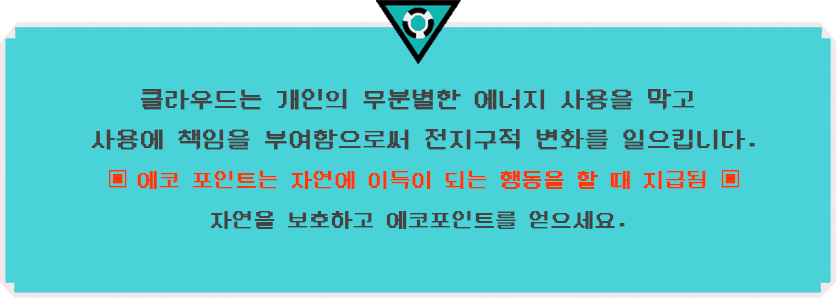
<style>
.page{position:relative;width:836px;height:298px;background:#49d2d7}
.page>*{position:absolute;margin:0}
.t1{font:24px/40px "DungGeunMo";color:#444242;font-weight:bold}
.t2{font:21.3px/40px "Gulim";color:#ff3608;font-weight:bold}
.t3{font:21.3px/40px "DungGeunMo";color:#ff3608;font-weight:bold}
.t4{font:21.3px/40px "DungGeunMo";color:#444242;font-weight:bold}
</style>
<div class="page">
<p class="t1" style="left:91px;top:89px;width:664px;height:140px;text-align:center">클라우드는 개인의 무분별한 에너지 사용을 막고 <br>사용에 책임을 부여함으로써 전지구적 변화를 일으킵니다.<br><span class="t2">▣ </span><span class="t3">에코 포인트는 자연에 이득이 되는 행동을 할 때 지급됨 </span><span class="t2">▣<br></span><span class="t4">자연을 보호하고 에코포인트를 얻으세요.</span></p>
</div>
